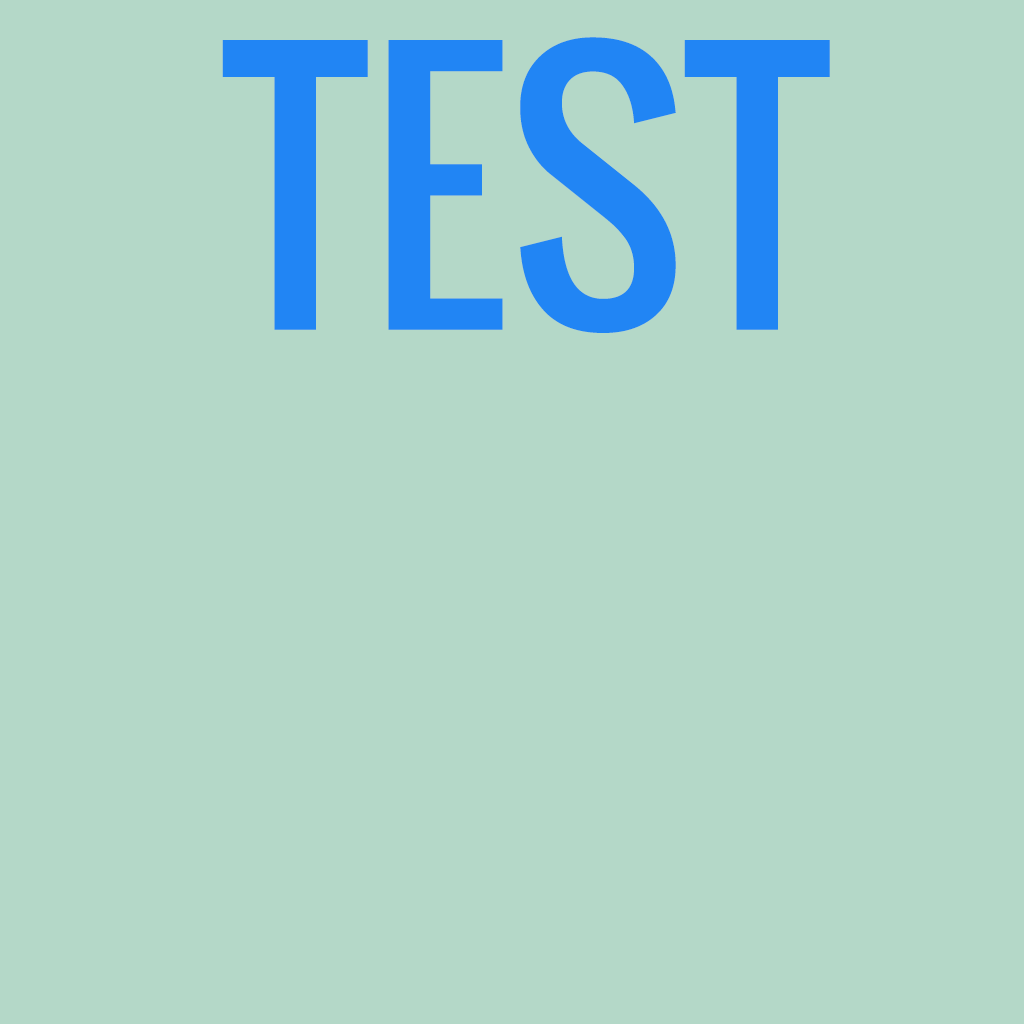
<style>
.page{position:relative;width:1024px;height:1024px;background:#b4d8c8}
.page>*{position:absolute;margin:0}
.t1{font:331px "Oswald-Regular";color:#2185f4}
</style>
<div class="page">
<p class="t1" style="left:222px;top:37px;width:608px;height:296px">TEST</p>
</div>
